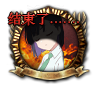
<style>
.page{position:relative;width:100px;height:88px;background:#ffffff}
.page>*{position:absolute;margin:0}
.t1{font:13.8px "STZhongsong"}
</style>
<div class="page">
<p class="t1" style="left:8px;top:12px;width:71px;height:14px">结束了.......</p>
</div>
